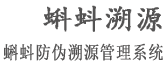
<style>
.page{position:relative;width:168px;height:62px;background:#ffffff}
.page>*{position:absolute;margin:0}
.t1{font:30px "¿¬Ìå";letter-spacing:0.025em;color:#545353;font-weight:bold}
.t2{font:18px "SimSun";letter-spacing:0.025em;color:#545353;font-weight:bold;scale:0.85 1}
</style>
<div class="page">
<p class="t1" style="left:43px;top:5px;width:119px;height:27px">蝌蚪溯源</p>
<p class="t2" style="left:3px;top:43px;width:160px;height:18px">蝌蚪防伪溯源管理系统</p>
</div>
